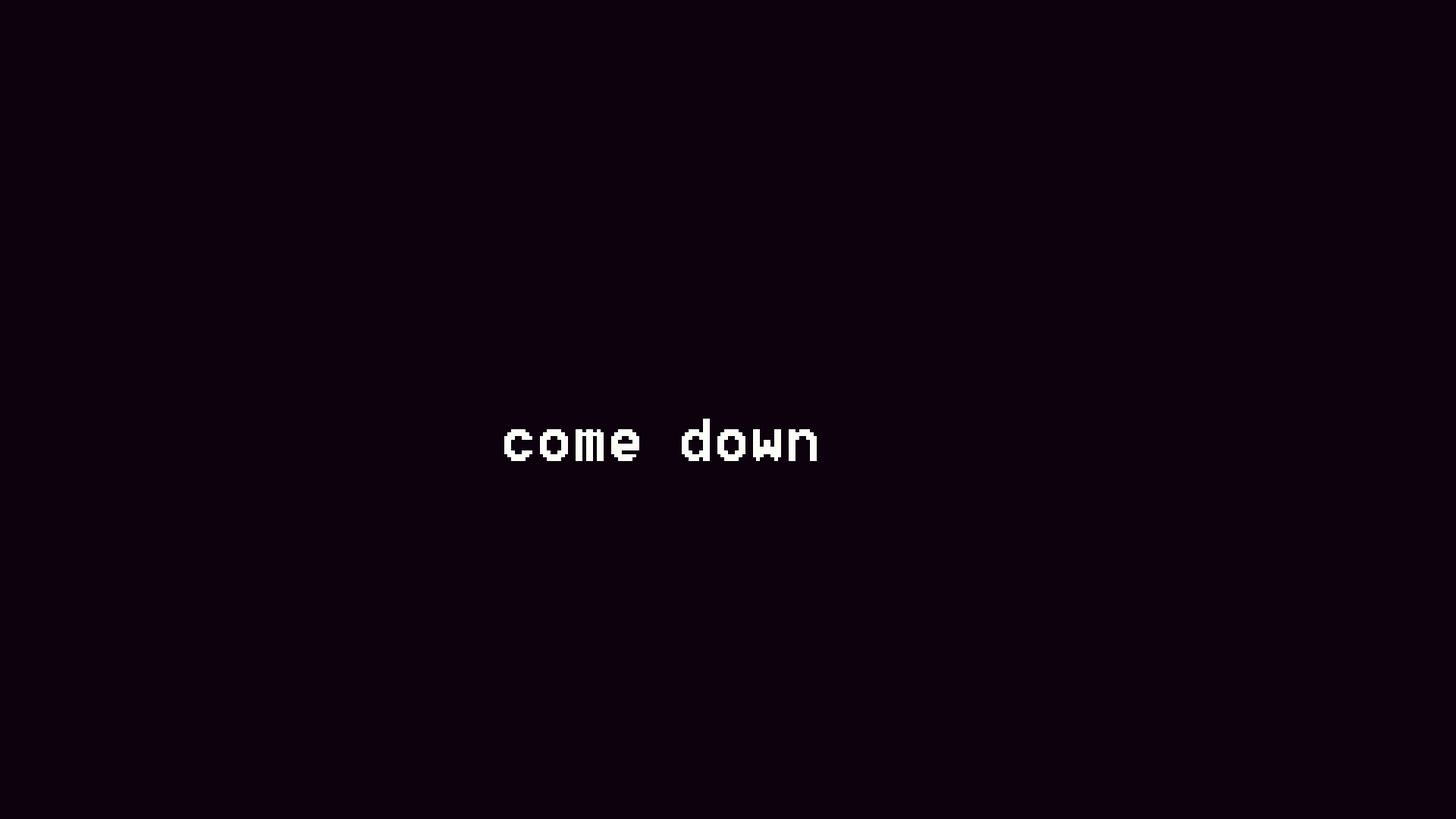
<style>
.page{position:relative;width:1456px;height:819px;background:#0c010c}
.page>*{position:absolute;margin:0}
.t1{font:75.8px "8514oem";color:#fbfff7}
</style>
<div class="page">
<p class="t1" style="left:504px;top:419px;width:313px;height:42px">come down</p>
</div>
